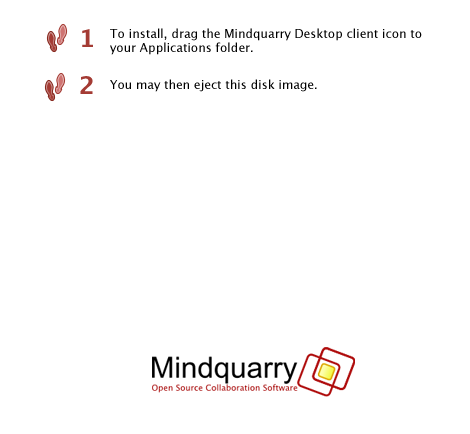
<style>
.page{position:relative;width:470px;height:434px;background:#ffffff}
.page>*{position:absolute;margin:0}
.t1{font:24px "LucidaGrande-Bold";color:#a43b34}
.t2{font:12px "LucidaGrande";color:#000000}
</style>
<div class="page">
<p class="t1" style="left:82px;top:29px;width:11px;height:18px">1</p>
<p class="t2" style="left:110px;top:28px;width:312px;height:27px">To install, drag the Mindquarry Desktop client icon to <br>your Applications folder.</p>
<p class="t1" style="left:80px;top:76px;width:13px;height:18px">2</p>
<p class="t2" style="left:110px;top:79px;width:207px;height:13px">You may then eject this disk image.</p>
</div>
